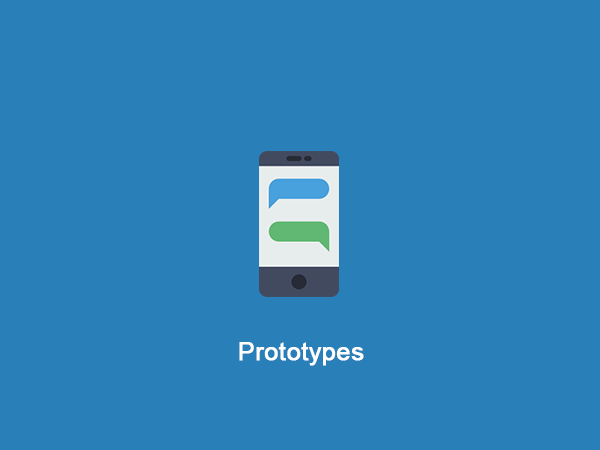
<style>
.page{position:relative;width:600px;height:450px;background:#2980b9}
.page>*{position:absolute;margin:0}
.t1{font:25px "ArialMT";color:#ffffff;font-weight:bold}
</style>
<div class="page">
<p class="t1" style="left:239px;top:342px;width:125px;height:24px">Prototypes</p>
</div>
